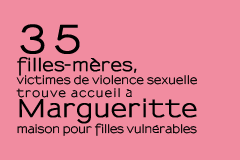
<style>
.page{position:relative;width:240px;height:160px;background:#f18ca0}
.page>*{position:absolute;margin:0}
.t1{font:11.1px/16px "Sansumi-Bold";letter-spacing:0.01em;color:#000000;scale:0.93 1}
.t2{font:24px/25px "Sansumi-Bold";letter-spacing:-0.04em;color:#000000}
.t3{font:38.2px/31px "Sansumi-Bold";letter-spacing:0.12em;color:#000000;font-weight:bold;scale:0.93 1}
.t4{font:17px/18px "Sansumi-Bold";letter-spacing:0.02em;color:#000000;font-weight:bold;scale:0.93 1}
.t5{font:11.1px/13px "Sansumi-Bold";letter-spacing:0.03em;color:#000000;scale:0.93 1}
.t6{font:11.1px/13px "Sansumi-Bold";letter-spacing:0.13em;color:#000000;scale:0.93 1}
.t7{font:23.9px/20px "Sansumi-Bold";letter-spacing:0.03em;color:#000000;font-weight:bold;scale:0.93 1}
</style>
<div class="page">
<p class="t1" style="left:16px;top:24px;width:181px;height:112px"><span class="t2"><br></span><span class="t3">35<br></span><span class="t4">filles-mères,<br></span><span class="t5">victimes de violence sexuelle<br></span><span class="t6">trouve accueil à<br></span><span class="t7">Margueritte<br></span>maison pour filles vulnérables</p>
</div>
